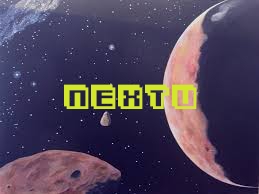
<style>
.page{position:relative;width:259px;height:194px}
.page>*{position:absolute;margin:0}
.t1{font:43px "3Dventure";color:#d2e62a}
</style>
<div class="page">
<p class="t1" style="left:64px;top:84px;width:133px;height:25px">NextU</p>
</div>
